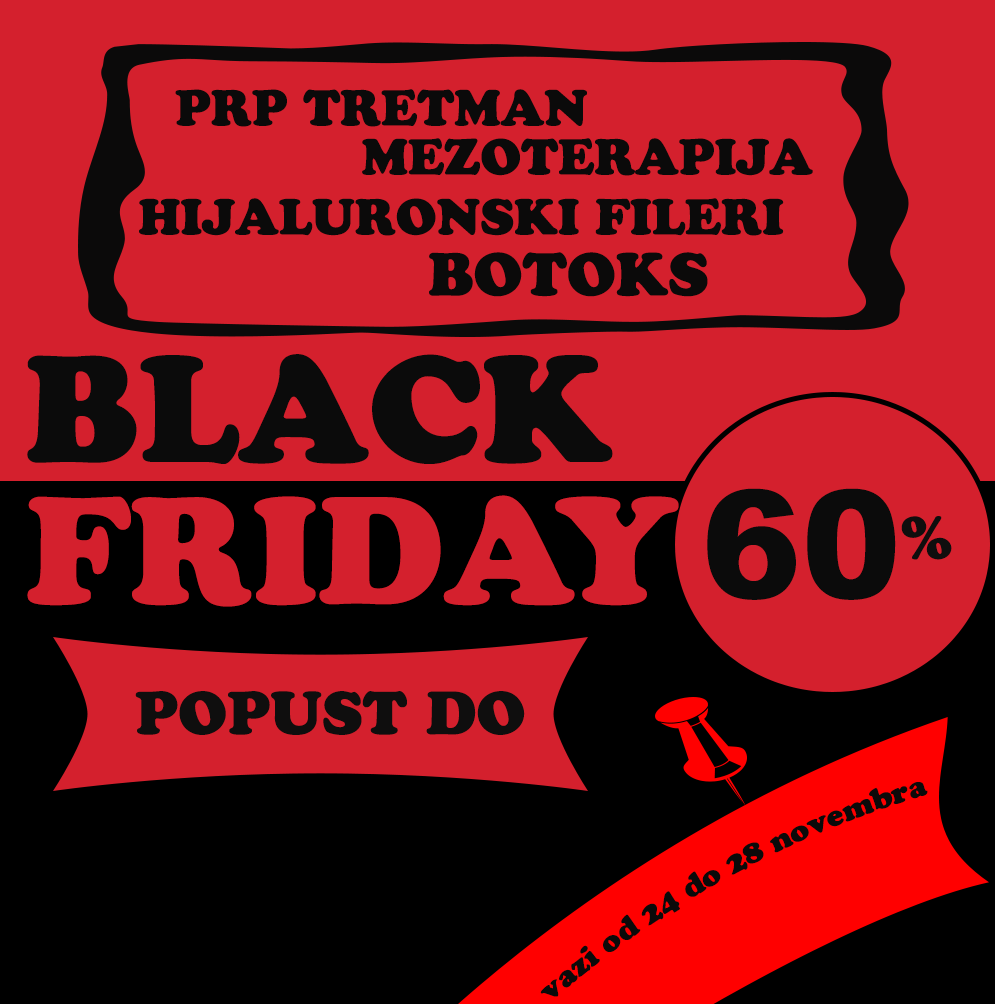
<style>
.page{position:relative;width:995px;height:1004px;background:#d4202d}
.page>*{position:absolute;margin:0}
.t1{font:50px "CooperBlackStd";color:#0b0a0a}
.t2{font:60px "CooperBlackStd";color:#0b0a0a}
.t3{font:150px "CooperBlackStd";color:#0b0b0b}
.t4{font:150px "CooperBlackStd";color:#d4202d}
.t5{font:150px "Arial-Black";color:#0b0b0b}
.t6{font:60px "CooperBlackStd";color:#0f0e0e}
.t7{font:30px "CooperBlackStd";color:#0b0a0a}
</style>
<div class="page">
<p class="t1" style="left:175px;top:89px;width:412px;height:38px">PRP TRETMAN</p>
<p class="t1" style="left:362px;top:138px;width:451px;height:38px">MEZOTERAPIJA</p>
<p class="t1" style="left:139px;top:198px;width:645px;height:38px">HIJALURONSKI FILERI</p>
<p class="t2" style="left:429px;top:252px;width:279px;height:45px">BOTOKS</p>
<p class="t3" style="left:27px;top:354px;width:586px;height:110px">BLACK</p>
<p class="t4" style="left:27px;top:495px;width:652px;height:112px">FRIDAY</p>
<p class="t5" style="left:707px;top:488px;width:189px;height:112px">60</p>
<p class="t6" style="left:901px;top:516px;width:51px;height:44px">%</p>
<p class="t6" style="left:135px;top:691px;width:390px;height:44px">POPUST DO</p>
<p class="t7" style="left:540px;top:782px;width:388px;height:215px;rotate:-29deg">vazi od 24 do 28 novembra</p>
</div>
